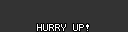
<style>
.page{position:relative;width:128px;height:32px;background:#333333}
.page>*{position:absolute;margin:0}
.t1{font:8px "Terminal";color:#ffffff}
</style>
<div class="page">
<p class="t1" style="left:37px;top:24px;width:52px;height:7px">HURRY UP!</p>
</div>
